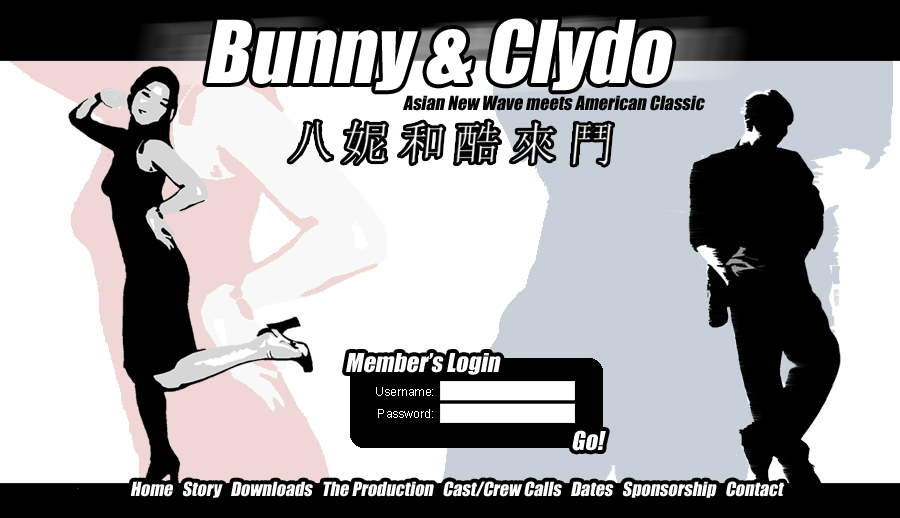
<style>
.page{position:relative;width:900px;height:518px;background:#ffffff}
.page>*{position:absolute;margin:0}
.t1{font:80px "Impact";color:#ffffff;font-style:italic}
.t2{font:18px "Impact";color:#000000;font-style:italic}
.t3{font:24px "Impact";color:#ffffff;font-style:italic}
.t4{font:12px/21.6px "ArialMT";color:#ffffff}
.t5{font:18px "Impact";color:#ffffff;font-style:italic}
</style>
<div class="page">
<p class="t1" style="left:206px;top:18px;width:467px;height:73px">Bunny &amp; Clydo</p>
<p class="t2" style="left:403px;top:95px;width:302px;height:16px">Asian New Wave meets American Classic</p>
<p class="t3" style="left:346px;top:353px;width:155px;height:22px">Member’s Login</p>
<p class="t4" style="left:376px;top:387px;width:57px;height:31px;text-align:right">Username:<br>Password:</p>
<p class="t3" style="left:572px;top:430px;width:34px;height:21px">Go!</p>
<p class="t5" style="left:130px;top:481px;width:655px;height:17px">Home   Story   Downloads   The Production   Cast/Crew Calls   Dates   Sponsorship   Contact</p>
</div>
